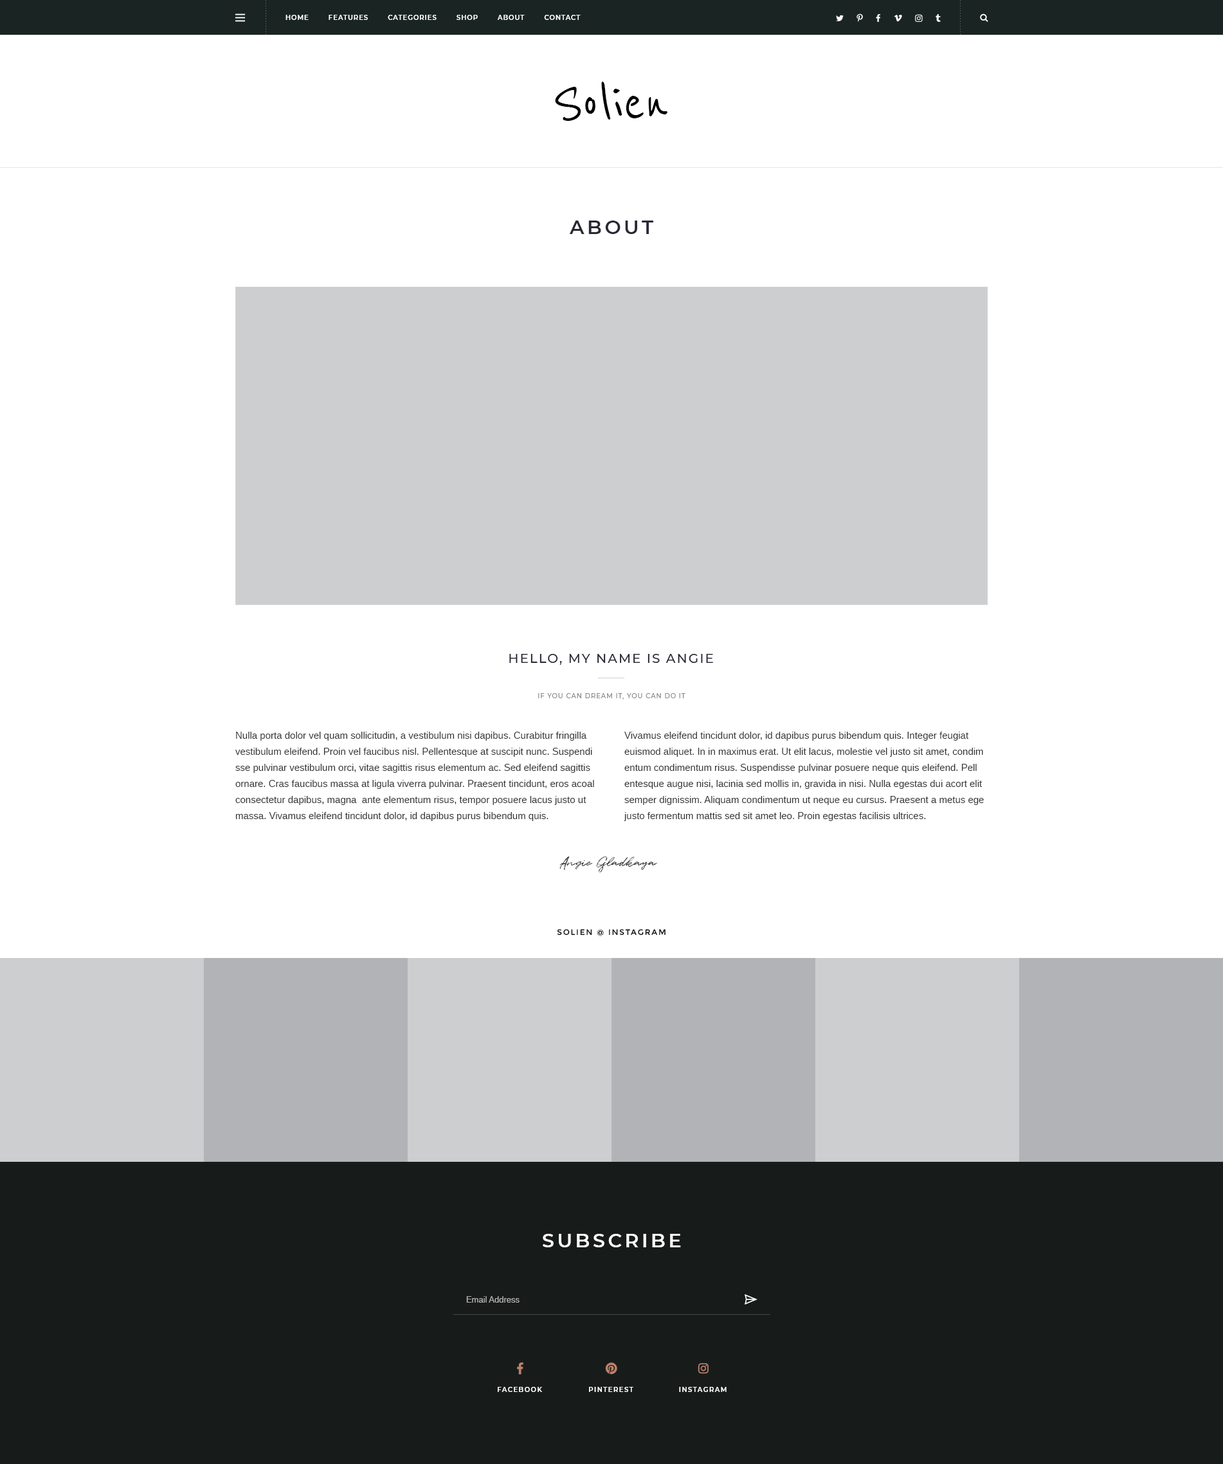
<style>
.page{position:relative;width:1223px;height:1464px;background:#ffffff}
.page>*{position:absolute;margin:0}
.t1{font:6.4px "Montserrat-SemiBold";letter-spacing:0.1em;color:#ffffff;text-transform:uppercase}
.t2{font:64.3px "ReenieBeanie";color:#000000}
.t3{font:19.3px "Montserrat-SemiBold";letter-spacing:0.15em;color:#2b2735;text-transform:uppercase}
.t4{font:12.9px "Montserrat-Medium";letter-spacing:0.1em;color:#2b2735;text-transform:uppercase}
.t5{font:6.4px "Montserrat-Medium";letter-spacing:0.1em;color:#8a8b8c;text-transform:uppercase}
.t6{font:9.6px/16.1px "Arimo";color:#333333}
.t7{font:12.9px "Quentin";color:#262324}
.t8{font:7.7px "Montserrat-Regular";letter-spacing:0.15em;color:#000000;text-transform:uppercase}
.t9{font:19.3px "Montserrat-SemiBold";letter-spacing:0.15em;color:#ffffff;text-transform:uppercase}
.t10{font:8.4px "Arimo";color:#b0b0b0}
.t11{font:6.4px "Montserrat-SemiBold";letter-spacing:0.15em;color:#ffffff;text-transform:uppercase}
</style>
<div class="page">
<p class="t1" style="left:285px;top:15px;width:295px;height:5px">Home        Features        Categories        Shop        About        Contact</p>
<p class="t2" style="left:555px;top:82px;width:112px;height:39px">Solien</p>
<p class="t3" style="left:569px;top:221px;width:84px;height:13px">About</p>
<p class="t4" style="left:509px;top:654px;width:204px;height:11px">Hello, my name is Angie</p>
<p class="t5" style="left:538px;top:693px;width:147px;height:6px">If you can dream it, you can do it</p>
<p class="t6" style="left:235px;top:732px;width:359px;height:89px">Nulla porta dolor vel quam sollicitudin, a vestibulum nisi dapibus. Curabitur fringilla vestibulum eleifend. Proin vel faucibus nisl. Pellentesque at suscipit nunc. Suspendi sse pulvinar vestibulum orci, vitae sagittis risus elementum ac. Sed eleifend sagittis ornare. Cras faucibus massa at ligula viverra pulvinar. Praesent tincidunt, eros acoal consectetur dapibus, magna  ante elementum risus, tempor posuere lacus justo ut massa. Vivamus eleifend tincidunt dolor, id dapibus purus bibendum quis.</p>
<p class="t6" style="left:624px;top:732px;width:360px;height:89px">Vivamus eleifend tincidunt dolor, id dapibus purus bibendum quis. Integer feugiat euismod aliquet. In in maximus erat. Ut elit lacus, molestie vel justo sit amet, condim entum condimentum risus. Suspendisse pulvinar posuere neque quis eleifend. Pell entesque augue nisi, lacinia sed mollis in, gravida in nisi. Nulla egestas dui acort elit semper dignissim. Aliquam condimentum ut neque eu cursus. Praesent a metus ege justo fermentum mattis sed sit amet leo. Proin egestas facilisis ultrices.</p>
<p class="t7" style="left:559px;top:856px;width:99px;height:16px">Angie Gladkaya</p>
<p class="t8" style="left:557px;top:929px;width:108px;height:7px">Solien @ Instagram</p>
<p class="t9" style="left:543px;top:1234px;width:138px;height:13px">SUBSCRIBE</p>
<p class="t10" style="left:466px;top:1296px;width:53px;height:6px">Email Address</p>
<p class="t11" style="left:498px;top:1387px;width:44px;height:5px">Facebook</p>
<p class="t11" style="left:589px;top:1387px;width:44px;height:5px">Pinterest</p>
<p class="t11" style="left:679px;top:1387px;width:47px;height:5px">Instagram</p>
</div>
